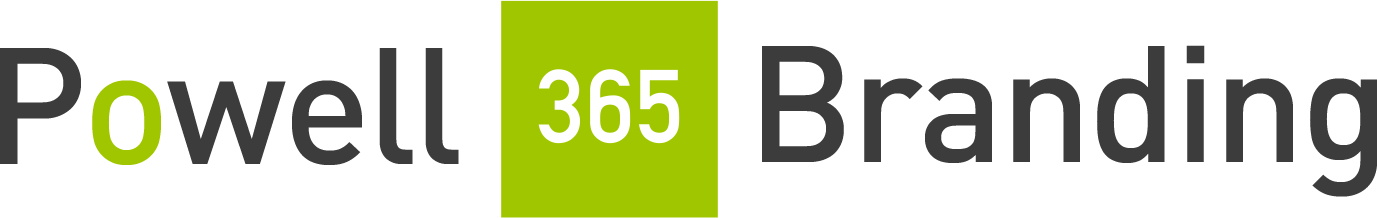
<style>
.page{position:relative;width:1377px;height:218px;background:#ffffff}
.page>*{position:absolute;margin:0}
.t1{font:162.6px "DIN-Medium";letter-spacing:-0.025em;color:#3c3c3c}
.t2{font:162.6px "DIN-Medium";letter-spacing:-0.025em;color:#a0c600}
</style>
<div class="page">
<p class="t1" style="left:0px;top:48px;width:459px;height:117px">P<span class="t2">o</span>well</p>
<p class="t1" style="left:762px;top:45px;width:615px;height:152px">Branding</p>
</div>
